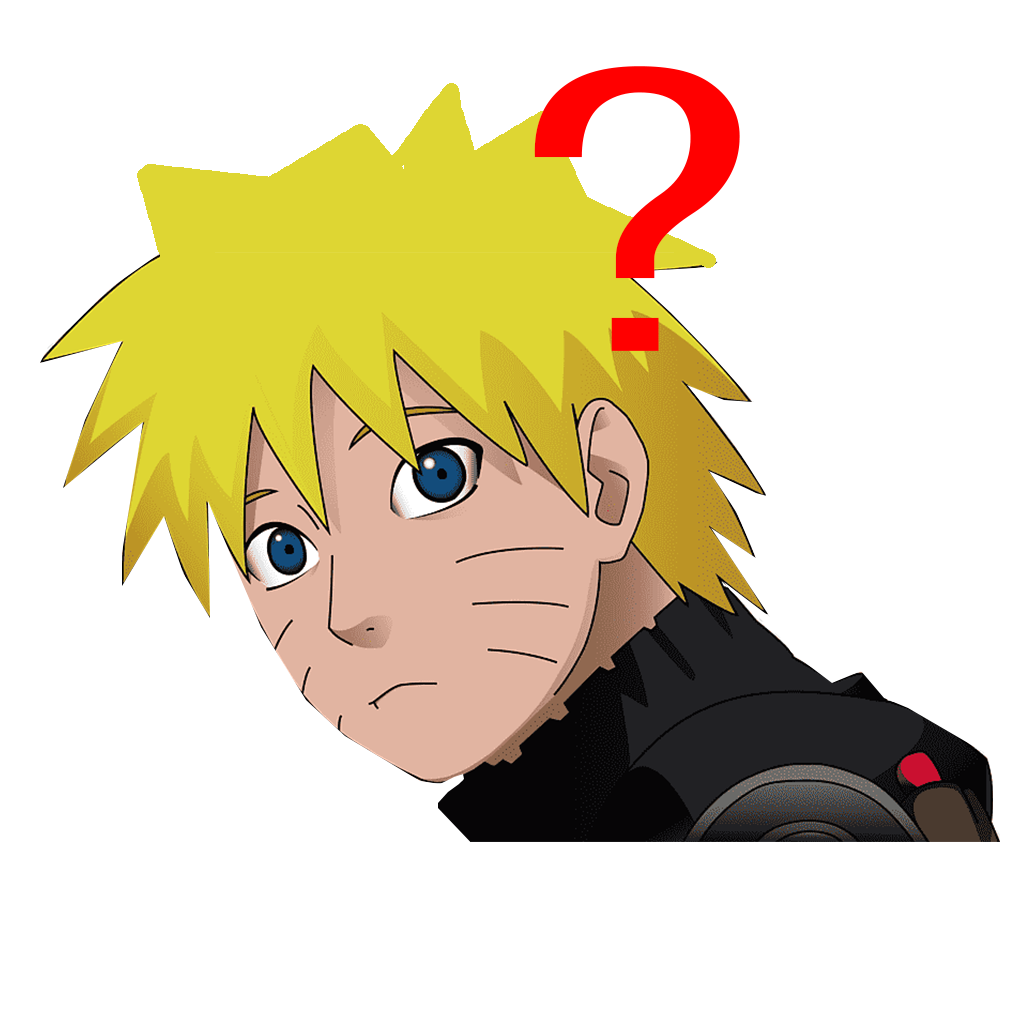
<style>
.page{position:relative;width:1024px;height:1024px;background:#ffffff}
.page>*{position:absolute;margin:0}
.t1{font:351.5px "MS-Gothic";color:#ff0000;scale:1.55 1}
</style>
<div class="page">
<p class="t1" style="left:534px;top:66px;width:206px;height:285px">?</p>
</div>
